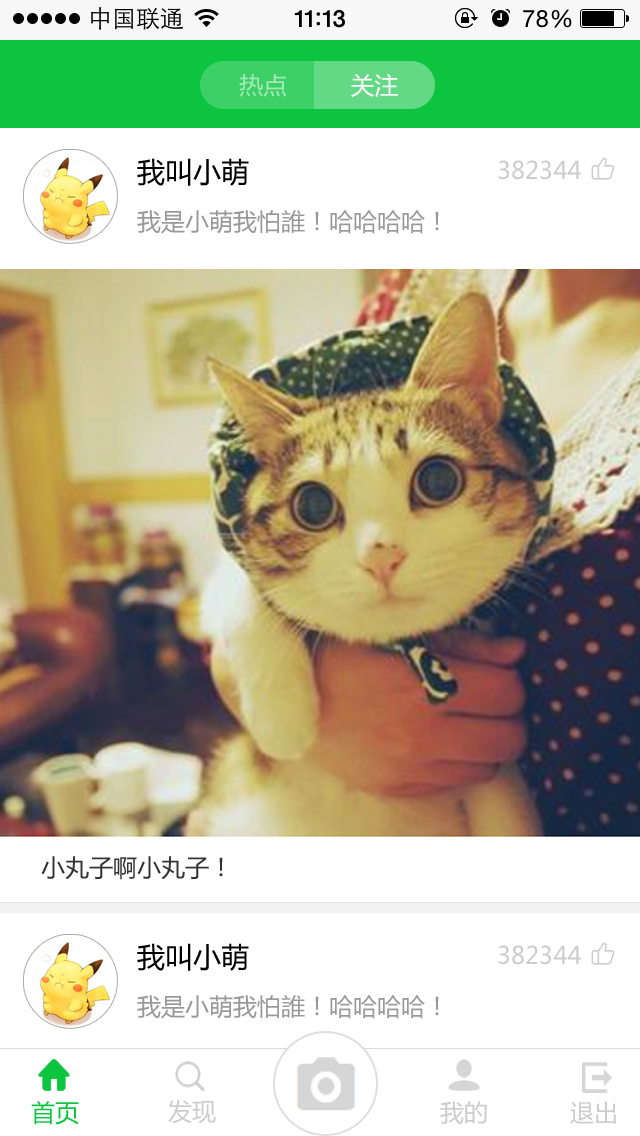
<style>
.page{position:relative;width:640px;height:1136px;background:#ffffff}
.page>*{position:absolute;margin:0}
.t1{font:24px "MicrosoftYaHei";color:#a3e9b7}
.t2{font:24px "MicrosoftYaHei";color:#ffffff}
.t3{font:28px "MicrosoftYaHei";color:#000000}
.t4{font:24px "MicrosoftYaHei";color:#cccccc}
.t5{font:24px "MicrosoftYaHei";color:#999999}
.t6{font:24px "MicrosoftYaHei";color:#333333}
.t7{font:24px "MicrosoftYaHei";color:#0dc441}
</style>
<div class="page">
<p class="t1" style="left:239px;top:73px;width:159px;height:24px">热点         <span class="t2">关注</span></p>
<p class="t3" style="left:137px;top:158px;width:112px;height:28px">我叫小萌</p>
<p class="t4" style="left:498px;top:160px;width:83px;height:20px">382344</p>
<p class="t5" style="left:137px;top:210px;width:302px;height:24px">我是小萌我怕誰！哈哈哈哈！</p>
<p class="t6" style="left:41px;top:856px;width:182px;height:24px">小丸子啊小丸子！</p>
<p class="t3" style="left:137px;top:943px;width:112px;height:28px">我叫小萌</p>
<p class="t4" style="left:498px;top:945px;width:83px;height:20px">382344</p>
<p class="t5" style="left:137px;top:995px;width:302px;height:24px">我是小萌我怕誰！哈哈哈哈！</p>
<p class="t7" style="left:31px;top:1101px;width:48px;height:24px">首页</p>
<p class="t4" style="left:168px;top:1100px;width:48px;height:24px">发现</p>
<p class="t4" style="left:440px;top:1101px;width:47px;height:23px">我的</p>
<p class="t4" style="left:570px;top:1101px;width:46px;height:23px">退出</p>
</div>
